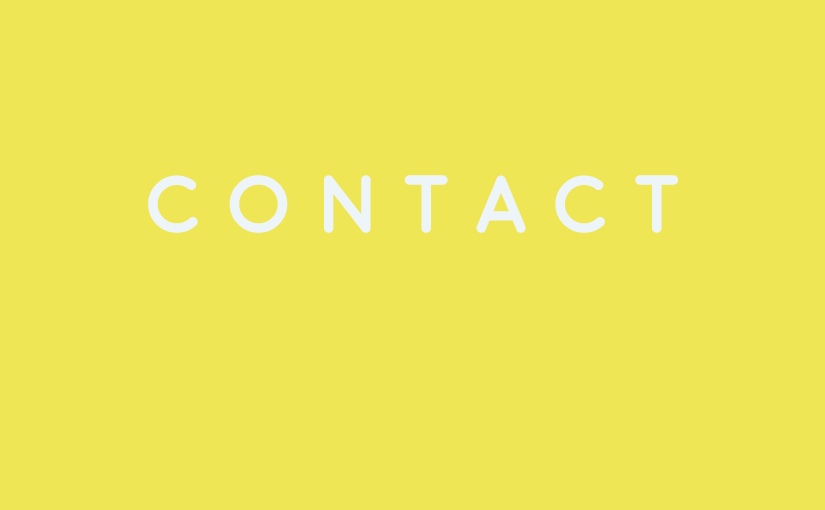
<style>
.page{position:relative;width:825px;height:510px;background:#efe656}
.page>*{position:absolute;margin:0}
.t1{font:82px "Moon-Bold";letter-spacing:0.32em;color:#eef5f8}
</style>
<div class="page">
<p class="t1" style="left:148px;top:175px;width:530px;height:58px">contact</p>
</div>
